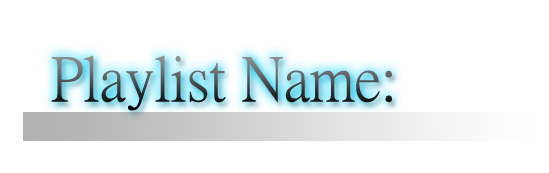
<style>
.page{position:relative;width:549px;height:173px;background:#ffffff}
.page>*{position:absolute;margin:0}
.t1{font:62px "PMingLiU"}
</style>
<div class="page">
<p class="t1" style="left:51px;top:55px;width:341px;height:56px">Playlist Name:</p>
</div>
